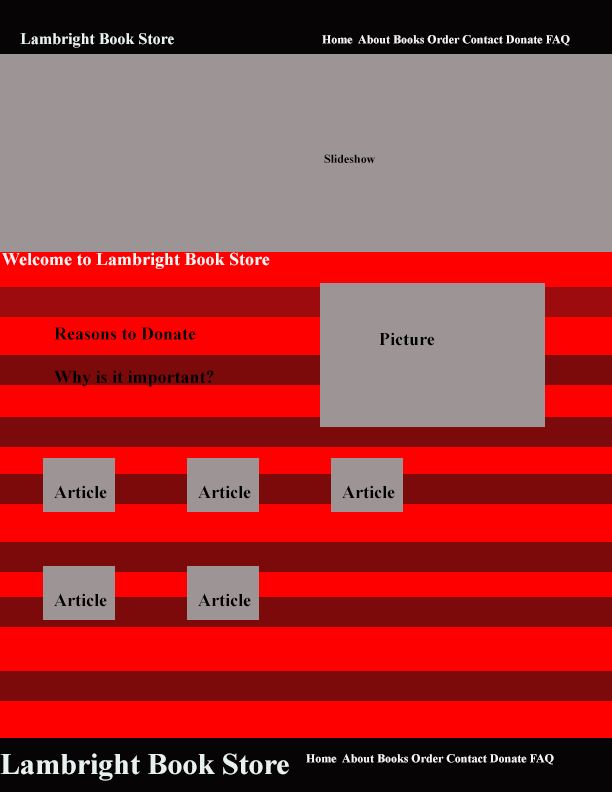
<style>
.page{position:relative;width:612px;height:792px;background:#9d9595}
.page>*{position:absolute;margin:0}
.t1{font:16px "TimesNewRomanPS-BoldMT";color:#e9f1f0}
.t2{font:12px "TimesNewRomanPS-BoldMT";color:#f7f4f4}
.t3{font:12px "TimesNewRomanPS-BoldMT";color:#000000}
.t4{font:18px "TimesNewRomanPS-BoldMT";color:#f7f4f4}
.t5{font:18px "TimesNewRomanPS-BoldMT";color:#000000}
.t6{font:30px "TimesNewRomanPS-BoldMT";color:#e9f1f0}
</style>
<div class="page">
<p class="t1" style="left:20px;top:33px;width:154px;height:15px">Lambright Book Store</p>
<p class="t2" style="left:322px;top:35px;width:248px;height:11px">Home  About Books Order Contact Donate FAQ</p>
<p class="t3" style="left:324px;top:154px;width:52px;height:9px">Slideshow</p>
<p class="t4" style="left:2px;top:252px;width:268px;height:17px">Welcome to Lambright Book Store</p>
<p class="t5" style="left:54px;top:327px;width:160px;height:60px">Reasons to Donate<br><br>Why is it important?</p>
<p class="t5" style="left:379px;top:332px;width:56px;height:14px">Picture</p>
<p class="t5" style="left:54px;top:485px;width:53px;height:14px">Article</p>
<p class="t5" style="left:198px;top:485px;width:53px;height:14px">Article</p>
<p class="t5" style="left:342px;top:485px;width:53px;height:14px">Article</p>
<p class="t5" style="left:54px;top:593px;width:53px;height:14px">Article</p>
<p class="t5" style="left:198px;top:593px;width:53px;height:14px">Article</p>
<p class="t6" style="left:0px;top:753px;width:289px;height:28px">Lambright Book Store</p>
<p class="t2" style="left:306px;top:754px;width:248px;height:11px">Home  About Books Order Contact Donate FAQ</p>
</div>
